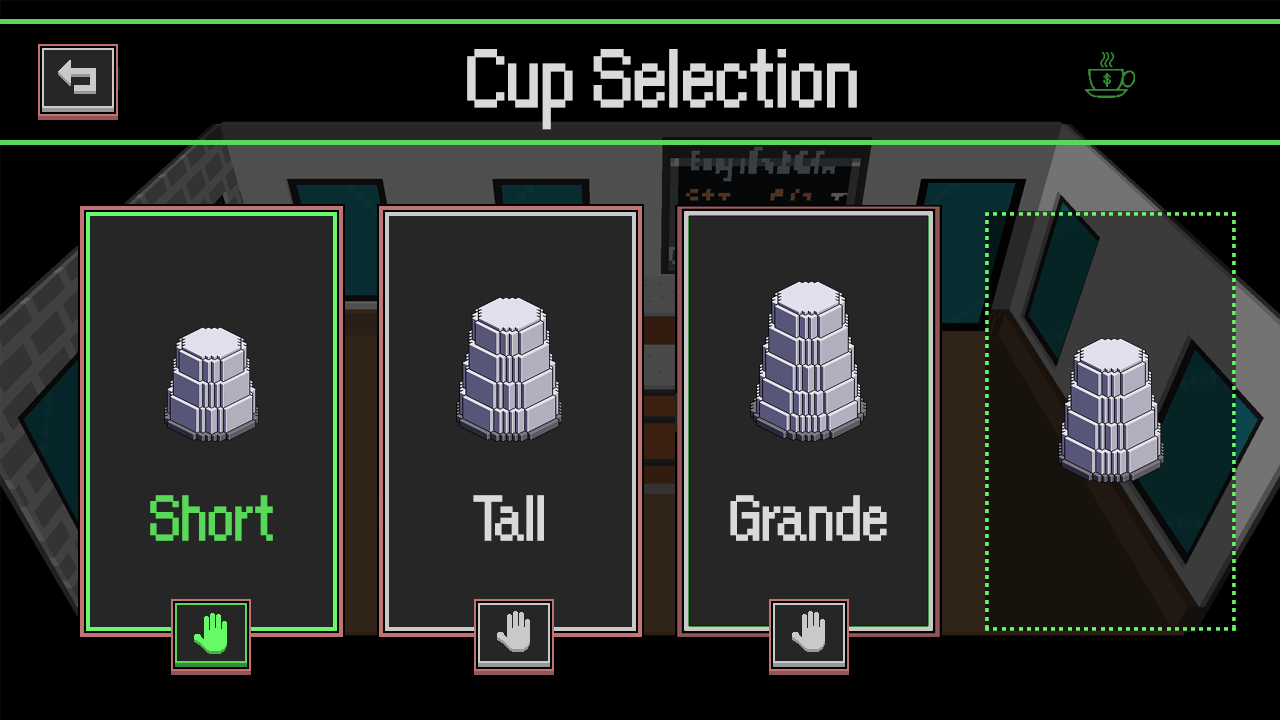
<style>
.page{position:relative;width:1280px;height:720px;background:#000000}
.page>*{position:absolute;margin:0}
.t1{font:90px "OrangeKid";letter-spacing:-0.01em;color:#dadada}
.t2{font:16.8px "OrangeKid";letter-spacing:-0.01em;color:#358e37}
.t3{font:69.8px "OrangeKid";letter-spacing:-0.01em;color:#59d959}
.t4{font:69.8px "OrangeKid";letter-spacing:-0.01em;color:#dadada}
</style>
<div class="page">
<p class="t1" style="left:467px;top:49px;width:390px;height:81px">Cup Selection</p>
<p class="t2" style="left:1103px;top:73px;width:8px;height:14px">$</p>
<p class="t3" style="left:150px;top:495px;width:123px;height:46px">Short</p>
<p class="t4" style="left:473px;top:495px;width:71px;height:46px">Tall</p>
<p class="t4" style="left:730px;top:495px;width:157px;height:46px">Grande</p>
</div>
